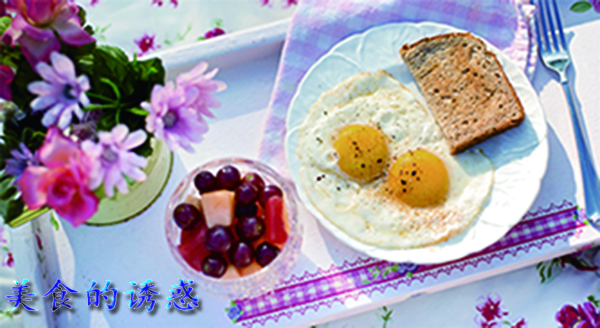
<style>
.page{position:relative;width:600px;height:328px}
.page>*{position:absolute;margin:0}
.t1{font:36.7px "¿¬Ìå";font-weight:bold;scale:1.1 1}
</style>
<div class="page">
<p class="t1" style="left:5px;top:278px;width:194px;height:34px">美食的诱惑</p>
</div>
